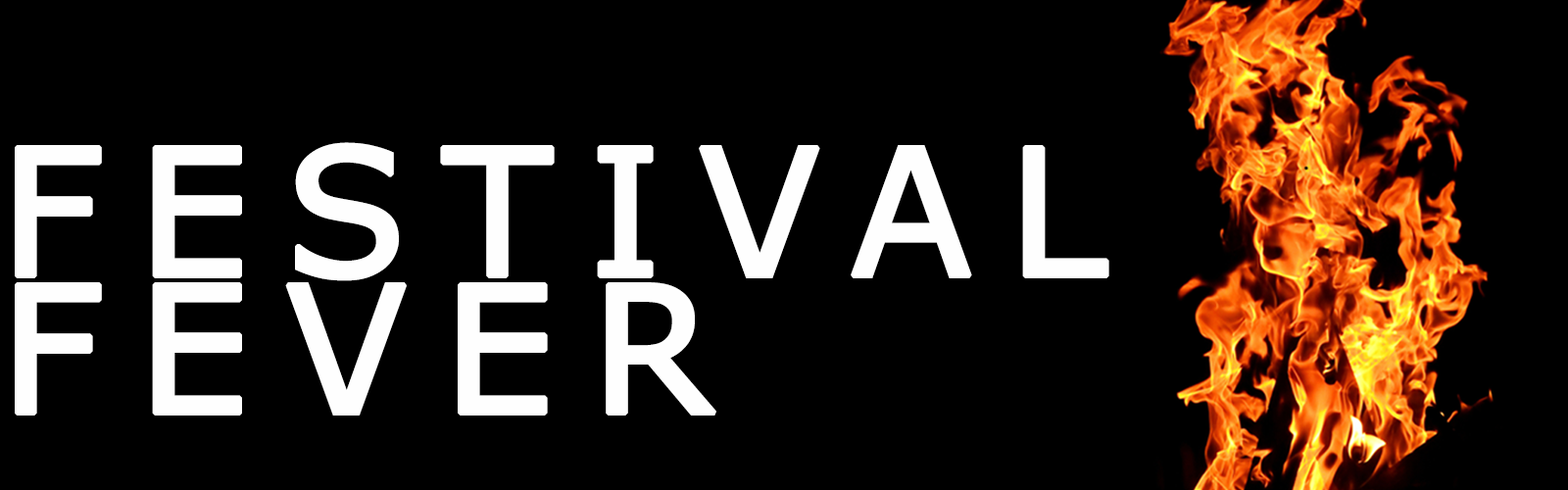
<style>
.page{position:relative;width:1568px;height:490px;background:#000000}
.page>*{position:absolute;margin:0}
.t1{font:176.4px/68.6px "MSReferenceSansSerif";letter-spacing:0.18em;color:#fefefe;text-transform:uppercase;font-weight:bold}
.t2{font:58.8px/47px "MSReferenceSansSerif";letter-spacing:0.18em;color:#fefefe;text-transform:uppercase;font-weight:bold}
</style>
<div class="page">
<p class="t1" style="left:15px;top:142px;width:1094px;height:274px"><span class="t2"><br><br><br></span><br>Festival<br> <br>Fever</p>
</div>
